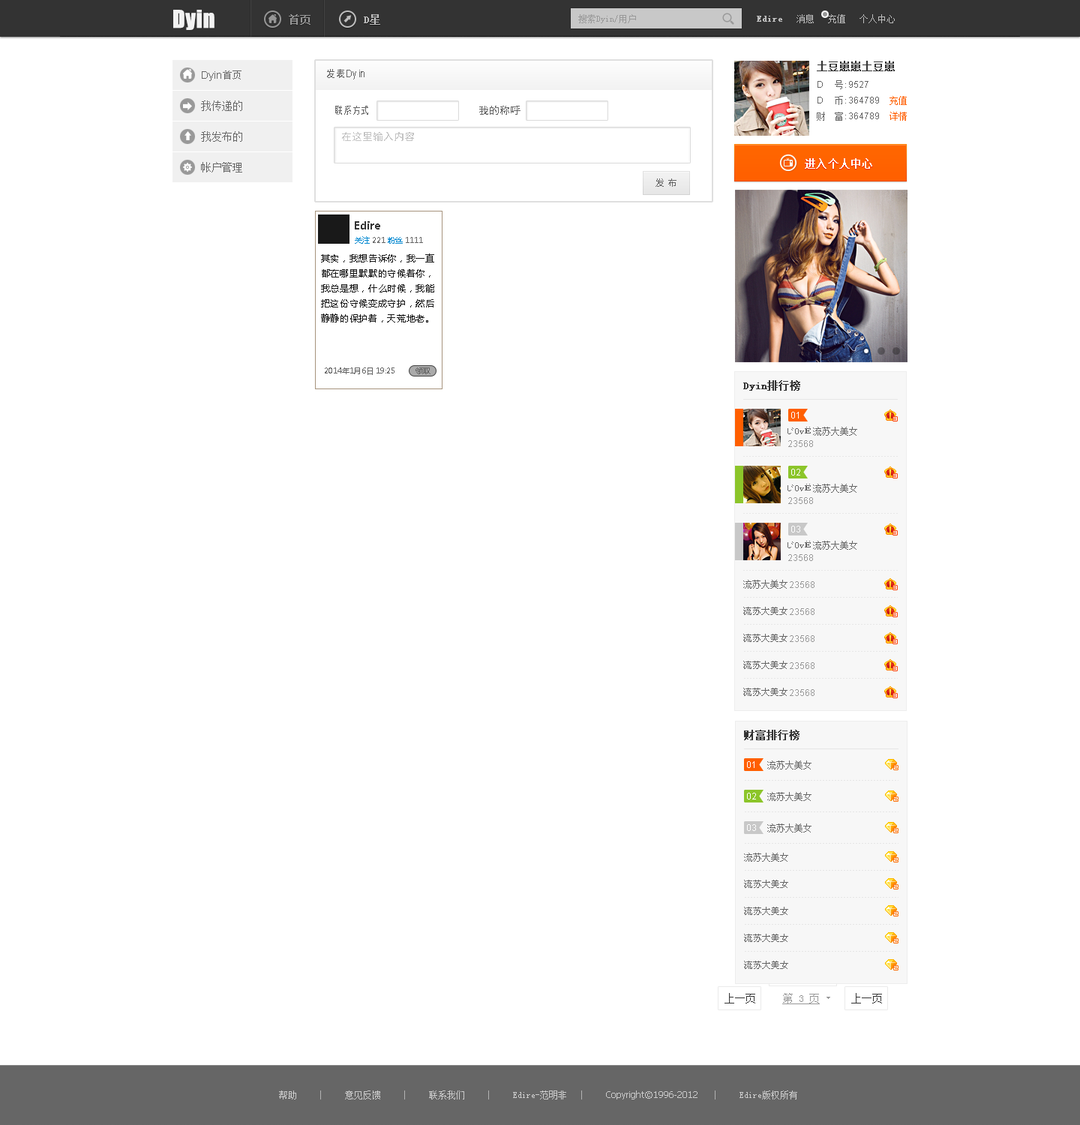
<style>
.page{position:relative;width:1080px;height:1125px;background:#ffffff}
.page>*{position:absolute;margin:0}
.t1{font:22.5px "Impact";color:#f2f2f2;font-weight:bold}
.t2{font:10.5px "SimSun";color:#aaaaaa;font-weight:bold}
.t3{font:10.5px "SimSun";color:#bebebe;font-weight:bold}
.t4{font:9px "SimSun";color:#999999}
.t5{font:9px "SimSun";color:#bebebe}
.t6{font:9px "SimSun";color:#bebebe;font-weight:bold}
.t7{font:10.5px "SimSun";color:#333333;font-weight:bold}
.t8{font:10.5px "ArialMT";color:#666666}
.t9{font:10.5px "AdobeHeitiStd-Regular";color:#666666}
.t10{font:10.5px "ArialMT";color:#666666;scale:0.87 1}
.t11{font:10.5px "SimHei";color:#666666;scale:0.87 1}
.t12{font:9px/15.8px "ArialMT";color:#666666}
.t13{font:9px/15.8px "SimSun";color:#666666}
.t14{font:9px/15.8px "SimSun";color:#ff5f00}
.t15{font:10.5px "SimSun";color:#666666}
.t16{font:10.5px "SimHei";color:#666666;scale:0.75 1}
.t17{font:10.5px "SimHei";color:#666666}
.t18{font:10.5px "SimHei";color:#c4c4c4}
.t19{font:10.5px "SimSun";letter-spacing:0.02em;color:#ffffff;font-weight:bold}
.t20{font:9px "MicrosoftYaHei";color:#666666}
.t21{font:10.5px "MicrosoftYaHei-Bold";color:#333333}
.t22{font:7.5px "MicrosoftYaHei";color:#666666}
.t23{font:7.5px "MicrosoftYaHei";color:#0a8cd2}
.t24{font:9px/15px "MicrosoftYaHei";color:#191919}
.t25{font:9px "ArialMT";color:#ffffff}
.t26{font:9px "SimSun";color:#666666}
.t27{font:9px "ArialMT";color:#999999}
.t28{font:10.5px "SimSun";color:#333333}
.t29{font:10.5px "SimSun";color:#969696;text-decoration:underline}
.t30{font:9px "SimSun";color:#cccccc}
.t31{font:9px "Tahoma";color:#cccccc}
</style>
<div class="page">
<p class="t1" style="left:173px;top:10px;width:41px;height:20px">Dyin</p>
<p class="t2" style="left:289px;top:14px;width:21px;height:11px">首页</p>
<p class="t3" style="left:364px;top:14px;width:16px;height:11px">D星</p>
<p class="t4" style="left:578px;top:14px;width:58px;height:9px">搜索Dyin/用户</p>
<p class="t5" style="left:757px;top:14px;width:138px;height:9px"><span class="t6">Edire</span>   消息   充值   个人中心</p>
<p class="t7" style="left:817px;top:61px;width:78px;height:10px">土豆崽崽土豆崽</p>
<p class="t8" style="left:202px;top:70px;width:40px;height:11px">Dyin<span class="t9">首页</span></p>
<p class="t10" style="left:327px;top:69px;width:37px;height:11px"><span class="t11">发表</span>Dyin</p>
<p class="t12" style="left:817px;top:80px;width:90px;height:41px;text-align:justify">D     <span class="t13">号:</span>9527<br>D     <span class="t13">币:</span>364789    <span class="t14">充值<br></span><span class="t13">财  富:</span>364789    <span class="t14">详情</span></p>
<p class="t15" style="left:201px;top:100px;width:41px;height:11px">我传递的</p>
<p class="t16" style="left:335px;top:106px;width:33px;height:9px">联系方式</p>
<p class="t17" style="left:479px;top:106px;width:41px;height:9px">我的称呼</p>
<p class="t15" style="left:201px;top:131px;width:41px;height:11px">我发布的</p>
<p class="t18" style="left:342px;top:132px;width:72px;height:9px">在这里输入内容</p>
<p class="t19" style="left:805px;top:158px;width:67px;height:11px">进入个人中心</p>
<p class="t15" style="left:201px;top:162px;width:41px;height:10px">帐户管理</p>
<p class="t20" style="left:656px;top:178px;width:20px;height:9px">发 布</p>
<p class="t21" style="left:355px;top:221px;width:25px;height:9px">Edire</p>
<p class="t22" style="left:355px;top:236px;width:68px;height:8px"><span class="t23">关注 </span>221 <span class="t23">粉丝 </span>1111</p>
<p class="t24" style="left:321px;top:254px;width:113px;height:68px;text-align:justify">其实，我想告诉你，我一直都在哪里默默的守候着你，我总是想，什么时候，我能把这份守候变成守护，然后静静的保护着，天荒地老。天荒地老。天荒地老。</p>
<p class="t22" style="left:325px;top:368px;width:69px;height:7px">2014年1月6日 19:25</p>
<p class="t22" style="left:416px;top:368px;width:14px;height:6px">领取</p>
<p class="t7" style="left:743px;top:380px;width:57px;height:11px">Dyin排行榜</p>
<p class="t25" style="left:791px;top:412px;width:8px;height:6px">01</p>
<p class="t26" style="left:788px;top:427px;width:69px;height:9px">じ0vЁ流苏大美女</p>
<p class="t27" style="left:788px;top:440px;width:25px;height:7px"><span class="t4">  </span>  23568</p>
<p class="t25" style="left:791px;top:469px;width:9px;height:7px">02</p>
<p class="t26" style="left:788px;top:484px;width:69px;height:9px">じ0vЁ流苏大美女</p>
<p class="t27" style="left:788px;top:497px;width:25px;height:7px"><span class="t4">  </span>  23568</p>
<p class="t25" style="left:791px;top:526px;width:9px;height:6px">03</p>
<p class="t26" style="left:788px;top:541px;width:69px;height:9px">じ0vЁ流苏大美女</p>
<p class="t27" style="left:788px;top:554px;width:25px;height:7px"><span class="t4">  </span>  23568</p>
<p class="t26" style="left:743px;top:580px;width:45px;height:9px">流苏大美女</p>
<p class="t27" style="left:790px;top:581px;width:24px;height:7px"><span class="t4">  </span>  23568</p>
<p class="t7" style="left:744px;top:730px;width:56px;height:10px">财富排行榜</p>
<p class="t25" style="left:747px;top:761px;width:7px;height:7px">01</p>
<p class="t26" style="left:767px;top:760px;width:45px;height:10px">流苏大美女</p>
<p class="t25" style="left:747px;top:793px;width:9px;height:7px">02</p>
<p class="t26" style="left:767px;top:792px;width:45px;height:9px">流苏大美女</p>
<p class="t25" style="left:747px;top:824px;width:9px;height:7px">03</p>
<p class="t26" style="left:767px;top:824px;width:45px;height:8px">流苏大美女</p>
<p class="t26" style="left:744px;top:853px;width:44px;height:9px">流苏大美女</p>
<p class="t28" style="left:724px;top:993px;width:31px;height:11px">上一页</p>
<p class="t29" style="left:782px;top:993px;width:38px;height:11px">第 3 页</p>
<p class="t28" style="left:851px;top:993px;width:31px;height:11px">上一页</p>
<p class="t30" style="left:279px;top:1090px;width:17px;height:10px">帮助</p>
<p class="t30" style="left:345px;top:1090px;width:35px;height:10px">意见反馈</p>
<p class="t30" style="left:429px;top:1090px;width:35px;height:10px">联系我们</p>
<p class="t30" style="left:513px;top:1090px;width:53px;height:10px">Edire-范明非</p>
<p class="t31" style="left:606px;top:1090px;width:92px;height:10px">Copyright©1996-2012</p>
<p class="t30" style="left:740px;top:1090px;width:57px;height:10px">Edire版权所有</p>
</div>
